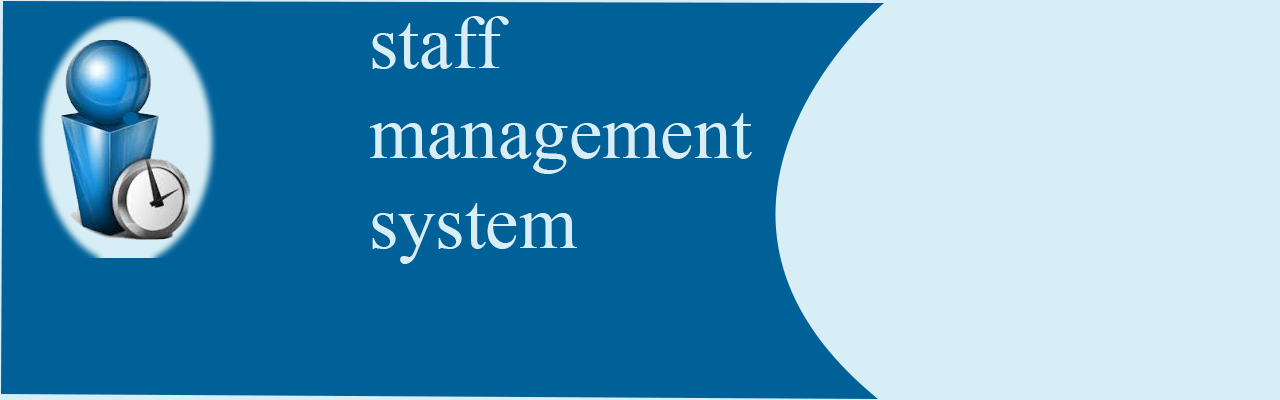
<style>
.page{position:relative;width:1280px;height:400px;background:#006198}
.page>*{position:absolute;margin:0}
.t1{font:75px "TimesNewRomanPSMT";color:#d7eef6}
</style>
<div class="page">
<p class="t1" style="left:369px;top:16px;width:383px;height:248px">staff <br>management system</p>
</div>
